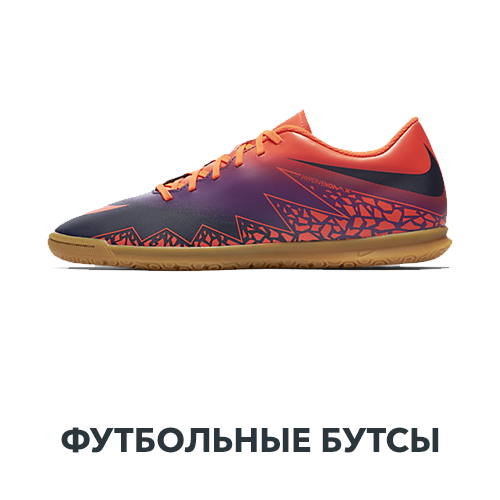
<style>
.page{position:relative;width:500px;height:500px;background:#ffffff}
.page>*{position:absolute;margin:0}
.t1{font:34px "AvenirNextW1G-Bold";color:#2a363b;text-transform:uppercase}
</style>
<div class="page">
<p class="t1" style="left:61px;top:427px;width:378px;height:26px">Футбольные бутсы</p>
</div>
